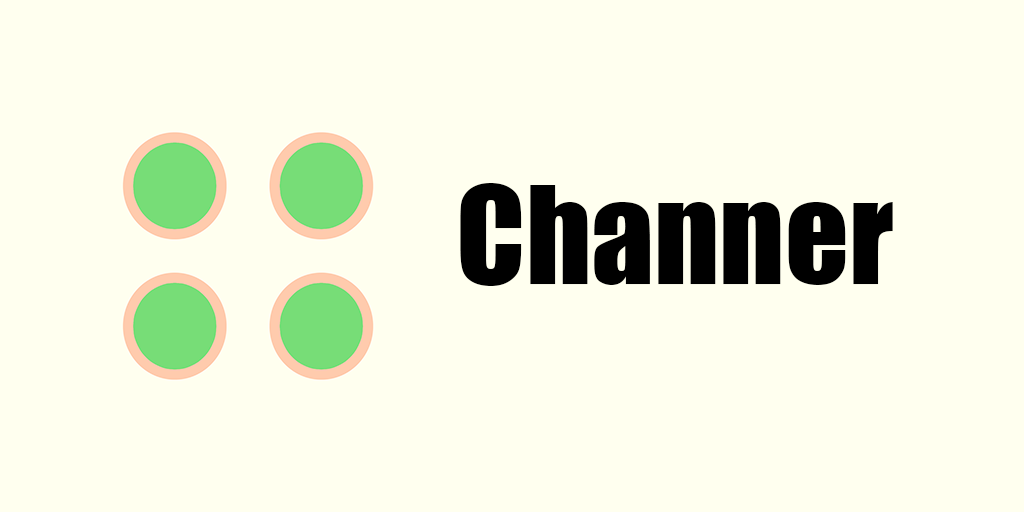
<style>
.page{position:relative;width:1024px;height:512px;background:#ffffef}
.page>*{position:absolute;margin:0}
.t1{font:125px "Impact";color:#000000}
</style>
<div class="page">
<p class="t1" style="left:460px;top:183px;width:433px;height:103px">Channer</p>
</div>
